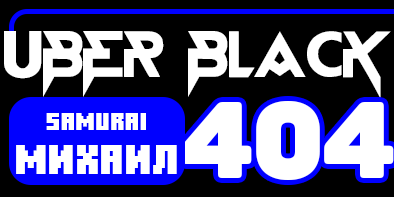
<style>
.page{position:relative;width:394px;height:197px;background:#000000}
.page>*{position:absolute;margin:0}
.t1{font:65.3px "BlackStarFJNTBYLYAJKA";color:#ffffff;text-transform:uppercase}
.t2{font:106.9px "Panton-ExtraBlack";color:#ffffff;text-transform:uppercase}
.t3{font:25px "MinecraftTen";color:#ffffff;text-transform:uppercase}
.t4{font:41.7px "MinecraftTen";color:#ffffff;text-transform:uppercase}
</style>
<div class="page">
<p class="t1" style="left:4px;top:31px;width:387px;height:67px">UBER BLACK</p>
<p class="t2" style="left:182px;top:101px;width:212px;height:79px">404</p>
<p class="t3" style="left:46px;top:113px;width:100px;height:17px">SAMURAI</p>
<p class="t4" style="left:16px;top:145px;width:161px;height:29px">Михаил</p>
</div>
